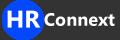
<style>
.page{position:relative;width:120px;height:40px;background:#333333}
.page>*{position:absolute;margin:0}
.t1{font:24px "Leelawadee-Bold";letter-spacing:0.005em;color:#ffffff}
.t2{font:18px "Leelawadee-Bold";letter-spacing:0.005em;color:#ffffff}
</style>
<div class="page">
<p class="t1" style="left:7px;top:10px;width:34px;height:18px">HR</p>
<p class="t2" style="left:44px;top:13px;width:71px;height:13px">Connext</p>
</div>
